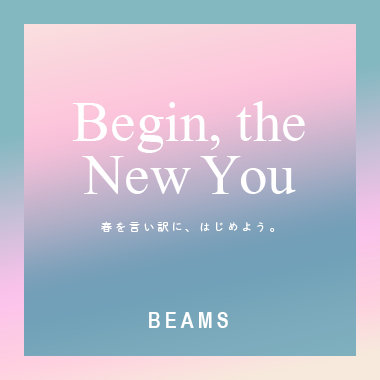
<style>
.page{position:relative;width:380px;height:380px}
.page>*{position:absolute;margin:0}
.t1{font:57px/53px "MongolianBaiti";color:#ffffff}
.t2{font:57px/53px "MongolianBaiti";letter-spacing:-0.05em;color:#ffffff}
.t3{font:11px "DNPShueiMGoStd-L";letter-spacing:0.3em;color:#ffffff}
.t4{font:22px "ArialNarrow-Bold";letter-spacing:0.2em;color:#ffffff}
</style>
<div class="page">
<p class="t1" style="left:72px;top:101px;width:233px;height:93px;text-align:center">Begin, the<br>Ne<span class="t2">w Y</span>ou</p>
<p class="t3" style="left:101px;top:221px;width:174px;height:11px">春を言い訳に、はじめよう。</p>
<p class="t4" style="left:149px;top:312px;width:79px;height:16px">BEAMS</p>
</div>
